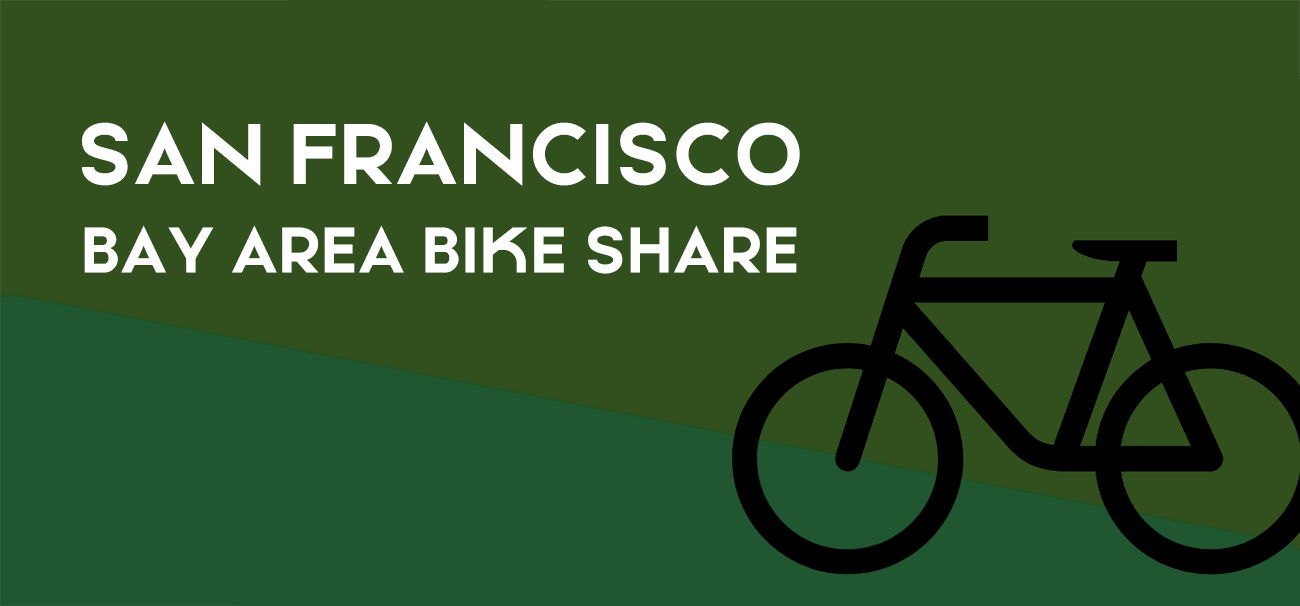
<style>
.page{position:relative;width:1300px;height:606px;background:#31501e}
.page>*{position:absolute;margin:0}
.t1{font:84.8px "MayekaBoldDemo";color:#ffffff;text-transform:uppercase}
.t2{font:63.6px "MayekaBoldDemo";color:#ffffff;text-transform:uppercase}
</style>
<div class="page">
<p class="t1" style="left:82px;top:121px;width:718px;height:65px">SAN FRANCISCO</p>
<p class="t2" style="left:84px;top:225px;width:713px;height:49px">BAY AREA BIKE SHARE</p>
</div>
